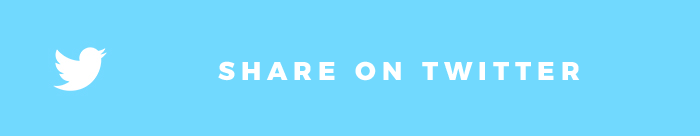
<style>
.page{position:relative;width:700px;height:136px;background:#71d9fe}
.page>*{position:absolute;margin:0}
.t1{font:25.8px "Montserrat-ExtraBold";letter-spacing:0.23em;color:#ffffff;text-transform:uppercase}
</style>
<div class="page">
<p class="t1" style="left:218px;top:61px;width:362px;height:20px">share on twitter</p>
</div>
